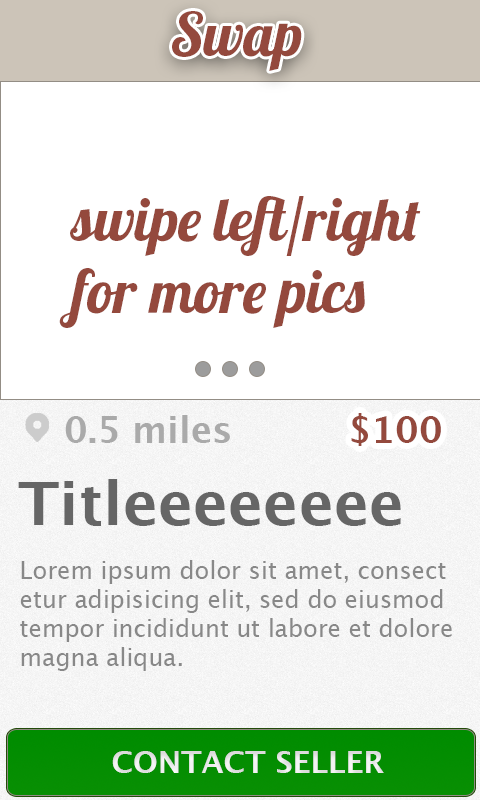
<style>
.page{position:relative;width:480px;height:800px;background:#ffffff}
.page>*{position:absolute;margin:0}
.t1{font:60px "Lobster1.4";color:#94493d}
.t2{font:36px "LucidaGrande-Bold";color:#94493d}
.t3{font:36px "LucidaGrande-Bold";color:#aaaaaa}
.t4{font:60px "LucidaGrande-Bold";color:#666666}
.t5{font:24px "LucidaGrande";color:#888888}
.t6{font:30px "LucidaGrande-Bold";color:#e8e8e8}
</style>
<div class="page">
<p class="t1" style="left:172px;top:11px;width:130px;height:60px">Swap</p>
<p class="t1" style="left:59px;top:196px;width:362px;height:132px">swipe left/right<br>for more pics</p>
<p class="t2" style="left:351px;top:413px;width:90px;height:33px">$100</p>
<p class="t3" style="left:65px;top:415px;width:165px;height:28px">0.5 miles</p>
<p class="t4" style="left:18px;top:479px;width:383px;height:47px">Titleeeeeeee</p>
<p class="t5" style="left:20px;top:560px;width:432px;height:111px">Lorem ipsum dolor sit amet, consect<br>etur adipisicing elit, sed do eiusmod <br>tempor incididunt ut labore et dolore <br>magna aliqua.</p>
<p class="t6" style="left:112px;top:751px;width:272px;height:22px">CONTACT SELLER</p>
</div>
